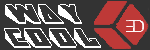
<style>
.page{position:relative;width:150px;height:50px;background:#333333}
.page>*{position:absolute;margin:0}
.t1{font:24px/36px "Wedgie-Regular";letter-spacing:0.04em;color:#ffffff}
</style>
<div class="page">
<p class="t1" style="left:4px;top:4px;width:97px;height:44px">WAY<br>COOL</p>
</div>
